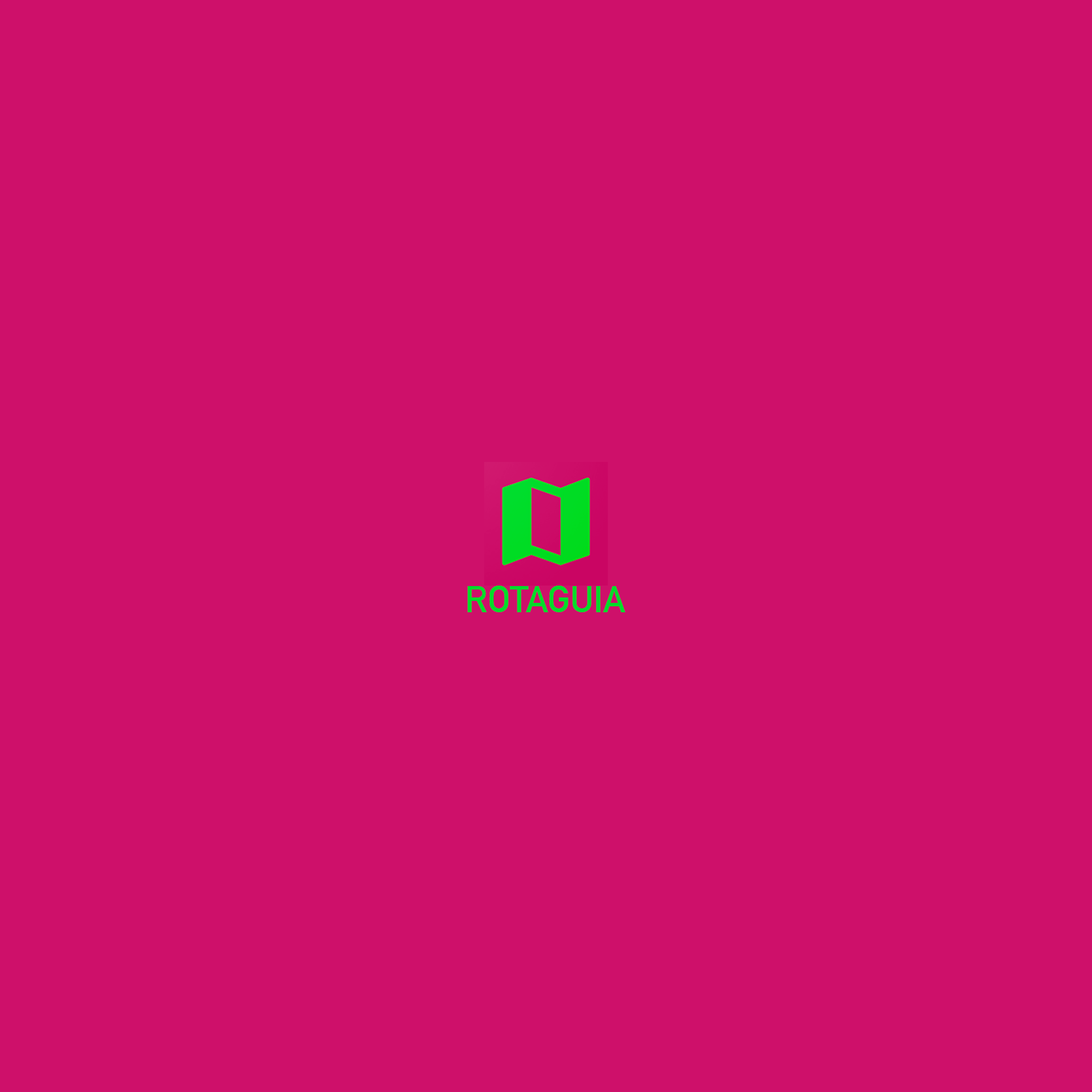
<style>
.page{position:relative;width:1092px;height:1092px;background:#ce106a}
.page>*{position:absolute;margin:0}
.t1{font:37.1px "DINAlternate-Bold";color:#00dc2a}
</style>
<div class="page">
<p class="t1" style="left:467px;top:586px;width:159px;height:26px">ROTAGUIA</p>
</div>
